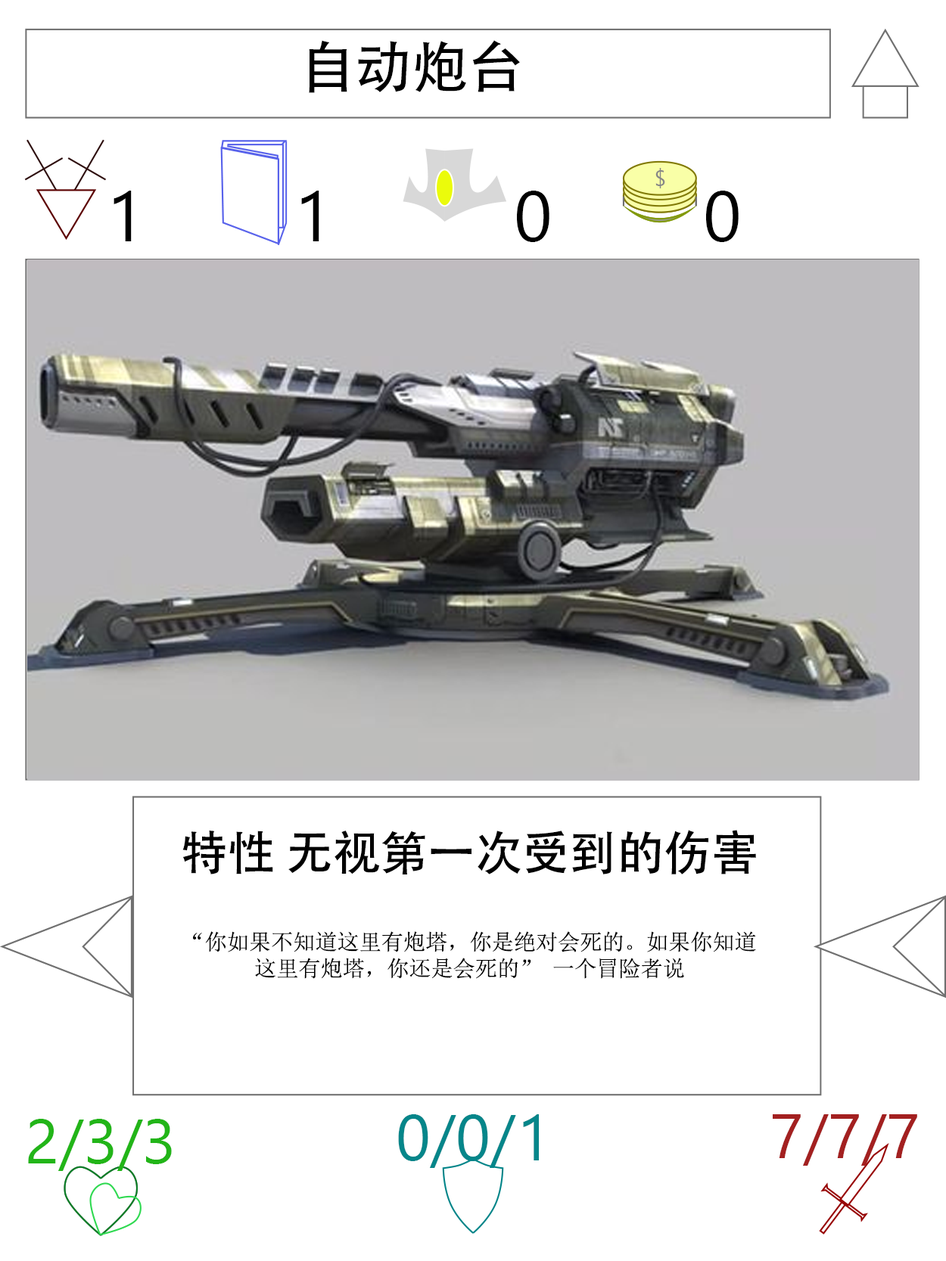
<style>
.page{position:relative;width:946px;height:1261px;background:#ffffff}
.page>*{position:absolute;margin:0}
.t1{font:56.7px "AdobeHeitiStd-Regular";color:#000000}
.t2{font:70.9px "SegoeUI";color:#000000}
.t3{font:22.1px "SimSun";color:#000000}
.t4{font:47.3px "AdobeHeitiStd-Regular";color:#000000}
.t5{font:63px "SegoeUI";color:#22b518}
.t6{font:64.6px "SegoeUI";color:#05868a}
.t7{font:63px "SegoeUI";color:#a32020}
</style>
<div class="page">
<p class="t1" style="left:309px;top:40px;width:211px;height:53px">自动炮台</p>
<p class="t2" style="left:113px;top:191px;width:19px;height:50px">1</p>
<p class="t2" style="left:301px;top:191px;width:18px;height:50px">1</p>
<p class="t2" style="left:517px;top:191px;width:32px;height:51px">0</p>
<p class="t2" style="left:706px;top:191px;width:32px;height:51px">0</p>
<p class="t3" style="left:182px;top:830px;width:574px;height:149px;text-align:center"><span class="t4">特性 无视第一次受到的伤害<br><br><br></span>“你如果不知道这里有炮塔，你是绝对会死的。如果你知道这里有炮塔，你还是会死的” 一个冒险者说</p>
<p class="t5" style="left:28px;top:1119px;width:144px;height:52px">2/3/3</p>
<p class="t6" style="left:398px;top:1114px;width:141px;height:54px">0/0/1</p>
<p class="t7" style="left:772px;top:1114px;width:145px;height:52px">7/7/7</p>
</div>
